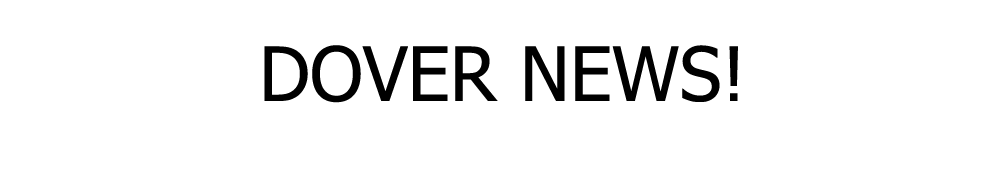
<style>
.page{position:relative;width:1000px;height:175px;background:#ffffff}
.page>*{position:absolute;margin:0}
.t1{font:75px "Tahoma";color:#000000}
</style>
<div class="page">
<p class="t1" style="left:264px;top:45px;width:474px;height:58px">DOVER NEWS!</p>
</div>
